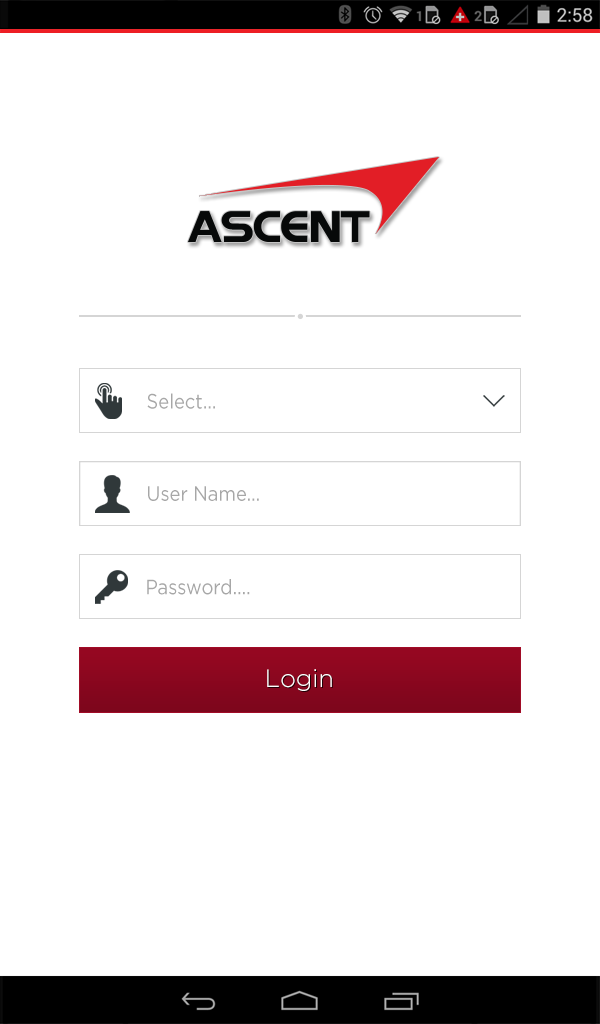
<style>
.page{position:relative;width:600px;height:1024px;background:#ffffff}
.page>*{position:absolute;margin:0}
.t1{font:20.6px "Gotham-Book";color:#a7a7a7;scale:0.89 1}
.t2{font:25.1px "Gotham-Light";color:#ffffff}
</style>
<div class="page">
<p class="t1" style="left:147px;top:393px;width:68px;height:16px">Select...</p>
<p class="t1" style="left:148px;top:486px;width:111px;height:15px">User Name...</p>
<p class="t1" style="left:147px;top:579px;width:103px;height:16px">Password....</p>
<p class="t2" style="left:267px;top:669px;width:65px;height:22px">Login</p>
</div>
